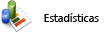
<style>
.page{position:relative;width:109px;height:33px;background:#ffffff}
.page>*{position:absolute;margin:0}
.t1{font:11px "SegoeUI";color:#000000}
</style>
<div class="page">
<p class="t1" style="left:44px;top:13px;width:55px;height:9px">Estadísticas</p>
</div>
